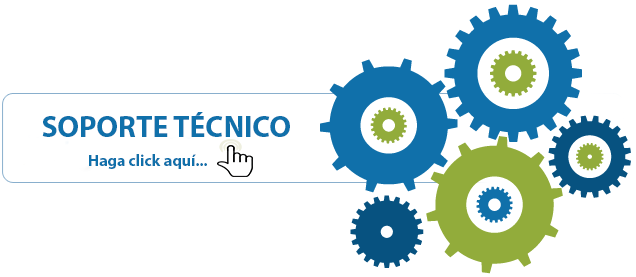
<style>
.page{position:relative;width:636px;height:277px;background:#ffffff}
.page>*{position:absolute;margin:0}
.t1{font:30px "MyriadPro-Bold";color:#1070aa}
.t2{font:16px "MyriadPro-Bold";color:#1070aa}
</style>
<div class="page">
<p class="t1" style="left:42px;top:112px;width:248px;height:25px">SOPORTE TÉCNICO</p>
<p class="t2" style="left:89px;top:154px;width:118px;height:15px">Haga click aquí...</p>
</div>
